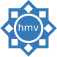
<style>
.page{position:relative;width:57px;height:57px;background:#ffffff}
.page>*{position:absolute;margin:0}
.t1{font:9.5px "Audiowide-Regular"}
</style>
<div class="page">
<p class="t1" style="left:18px;top:23px;width:21px;height:8px">hmv</p>
</div>
